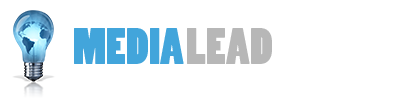
<style>
.page{position:relative;width:400px;height:100px;background:#ffffff}
.page>*{position:absolute;margin:0}
.t1{font:48px "PoplarStd";color:#42a5db}
.t2{font:48px "PoplarStd";color:#b7b7b7}
</style>
<div class="page">
<p class="t1" style="left:74px;top:28px;width:110px;height:36px">MEDIA</p>
<p class="t2" style="left:187px;top:28px;width:85px;height:36px">LEAD</p>
</div>
